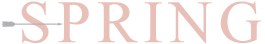
<style>
.page{position:relative;width:265px;height:44px;background:#ffffff}
.page>*{position:absolute;margin:0}
.t1{font:60.1px "TimesNewRomanPSMT";letter-spacing:0.1em;color:#e9c0b8}
</style>
<div class="page">
<p class="t1" style="left:21px;top:1px;width:241px;height:42px">SPRING</p>
</div>
